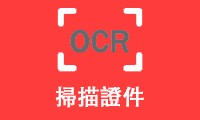
<style>
.page{position:relative;width:200px;height:120px;background:#ff3c3c}
.page>*{position:absolute;margin:0}
.t1{font:22px "AdobeHeitiStd-Regular";color:#ffffff;font-weight:bold}
</style>
<div class="page">
<p class="t1" style="left:55px;top:86px;width:89px;height:22px">掃描證件</p>
</div>
